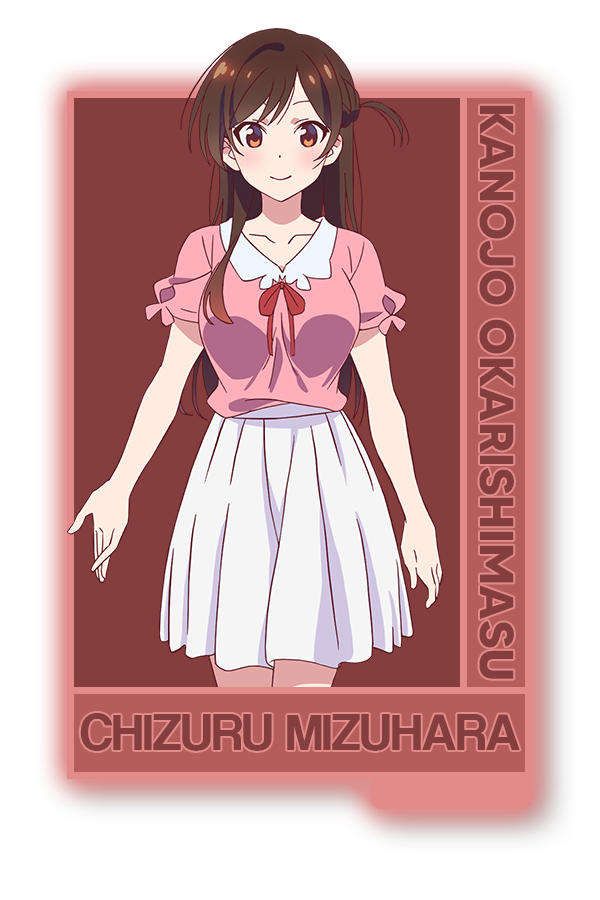
<style>
.page{position:relative;width:600px;height:900px;background:#ffffff}
.page>*{position:absolute;margin:0}
.t1{font:47.6px "MADETOMMY-Bold";color:#843e3e}
.t2{font:52.6px "CoolveticaRg-Regular";color:#843e3e}
</style>
<div class="page">
<p class="t1" style="left:479px;top:105px;width:35px;height:574px;rotate:90deg">KANOJO OKARISHIMASU</p>
<p class="t2" style="left:80px;top:713px;width:440px;height:38px">CHIZURU MIZUHARA</p>
</div>
